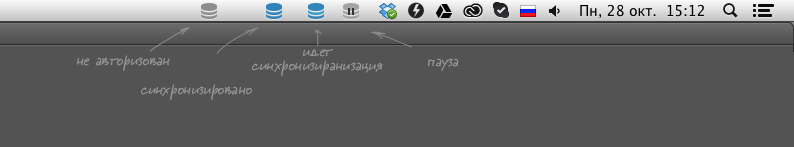
<style>
.page{position:relative;width:794px;height:147px;background:#535353}
.page>*{position:absolute;margin:0}
.t1{font:16px/14px "JeffScript";color:#959595}
.t2{font:16px "JeffScript";color:#959595}
</style>
<div class="page">
<p class="t1" style="left:252px;top:49px;width:131px;height:27px;text-align:center">идет<br>синхронизиранизация</p>
<p class="t2" style="left:77px;top:55px;width:93px;height:16px">не авторизован</p>
<p class="t2" style="left:428px;top:58px;width:31px;height:14px">пауза</p>
<p class="t2" style="left:141px;top:84px;width:111px;height:16px">синхронизировано</p>
</div>
